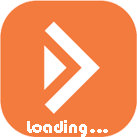
<style>
.page{position:relative;width:137px;height:137px;background:#f47b3e}
.page>*{position:absolute;margin:0}
.t1{font:18.1px "Bauhaus93";color:#ffffff}
</style>
<div class="page">
<p class="t1" style="left:27px;top:120px;width:81px;height:17px">Loading...</p>
</div>
